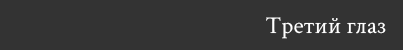
<style>
.page{position:relative;width:403px;height:50px;background:#333333}
.page>*{position:absolute;margin:0}
.t1{font:24px "CrimsonText-Regular";color:#ffffff}
</style>
<div class="page">
<p class="t1" style="left:266px;top:17px;width:120px;height:22px">Третий глаз</p>
</div>
